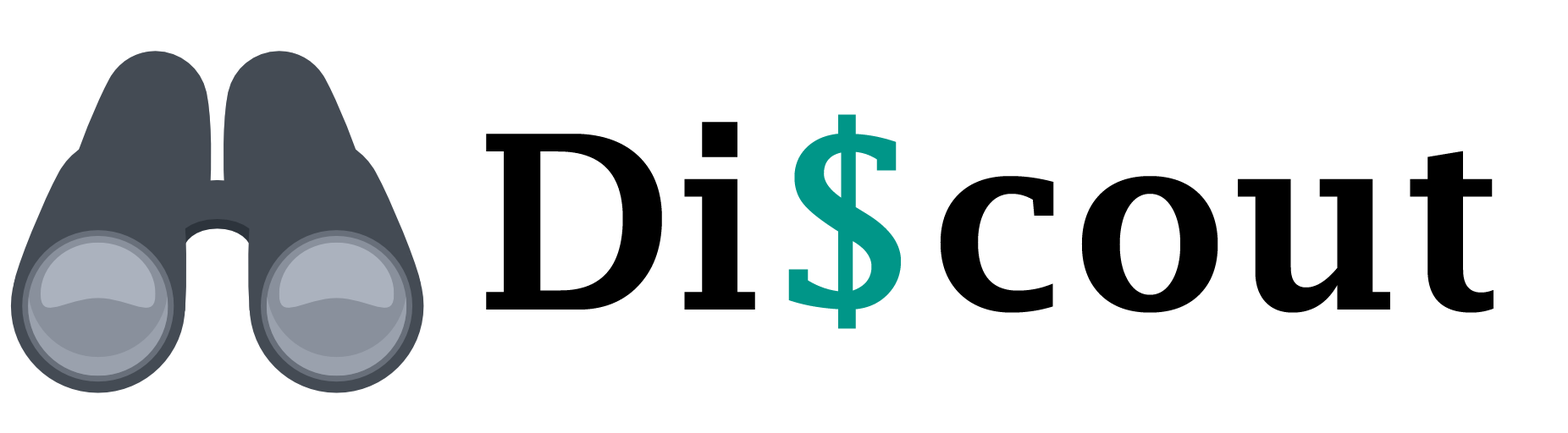
<style>
.page{position:relative;width:1568px;height:433px;background:#ffffff}
.page>*{position:absolute;margin:0}
.t1{font:243.4px "LucidaFax-Demi";letter-spacing:0.01em;color:#000000}
.t2{font:243.4px "LucidaFax-Demi";letter-spacing:0.01em;color:#009688}
</style>
<div class="page">
<p class="t1" style="left:486px;top:114px;width:1007px;height:215px">Di<span class="t2">$</span>cout</p>
</div>
